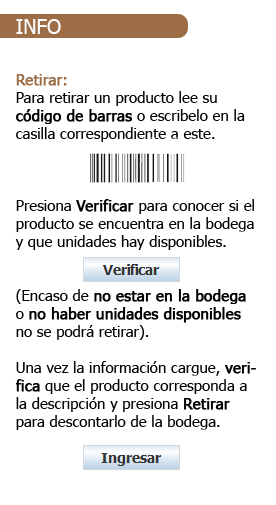
<style>
.page{position:relative;width:276px;height:505px;background:#ffffff}
.page>*{position:absolute;margin:0}
.t1{font:20px "Tahoma";color:#fcfbfb}
.t2{font:15px "Tahoma";color:#040000}
.t3{font:15px "Tahoma";color:#9d6d45;font-weight:bold}
.t4{font:15px "Tahoma";color:#040000;font-weight:bold}
</style>
<div class="page">
<p class="t1" style="left:16px;top:19px;width:45px;height:15px">INFO</p>
<p class="t2" style="left:15px;top:74px;width:241px;height:356px"><span class="t3">Retirar:<br></span>Para retirar un producto lee su <span class="t4">código de barras</span> o escribelo en la casilla correspondiente a este.<br><br><br><br>Presiona <span class="t4">Verificar </span>para conocer si el producto se encuentra en la bodega y que unidades hay disponibles.<br><br><br>(Encaso de <span class="t4">no estar en la bodega</span> o <span class="t4">no haber unidades disponibles </span>no se podrá retirar).<br><br>Una vez la información cargue, <span class="t4">verifica</span> que el producto corresponda a la descripción y presiona <span class="t4">Retirar</span> para descontarlo de la bodega.</p>
</div>
